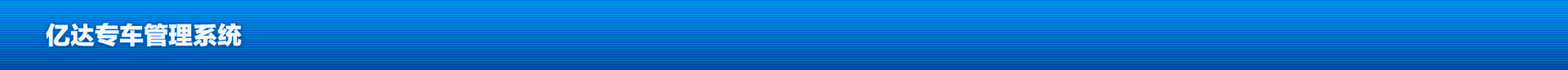
<style>
.page{position:relative;width:1568px;height:70px}
.page>*{position:absolute;margin:0}
.t1{font:24.5px "FZLTTHK--GBK1-0";color:#f5f5f5}
</style>
<div class="page">
<p class="t1" style="left:46px;top:23px;width:196px;height:24px">亿达专车管理系统</p>
</div>
